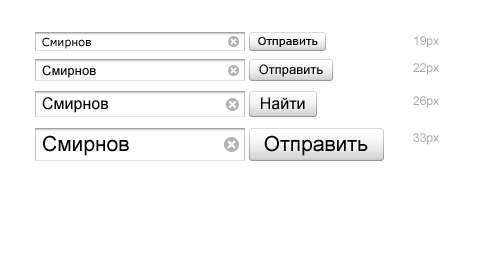
<style>
.page{position:relative;width:493px;height:280px;background:#ffffff}
.page>*{position:absolute;margin:0}
.t1{font:11px "Verdana";color:#000000}
.t2{font:12px/25px "ArialMT";color:#a9a9a9}
.t3{font:12px/31px "ArialMT";color:#a9a9a9}
.t4{font:12px/35px "ArialMT";color:#a9a9a9}
.t5{font:13px "ArialMT";color:#000000}
.t6{font:16px "ArialMT";color:#000000}
.t7{font:21px "ArialMT";color:#000000}
</style>
<div class="page">
<p class="t1" style="left:42px;top:37px;width:49px;height:12px">Смирнов</p>
<p class="t2" style="left:413px;top:36px;width:26px;height:109px">19px                   <br>22px<br><span class="t3">26px                  <br></span><span class="t4">33px</span></p>
<p class="t5" style="left:42px;top:65px;width:54px;height:13px">Смирнов</p>
<p class="t6" style="left:42px;top:97px;width:66px;height:16px">Смирнов</p>
<p class="t7" style="left:43px;top:135px;width:86px;height:21px">Смирнов</p>
</div>
